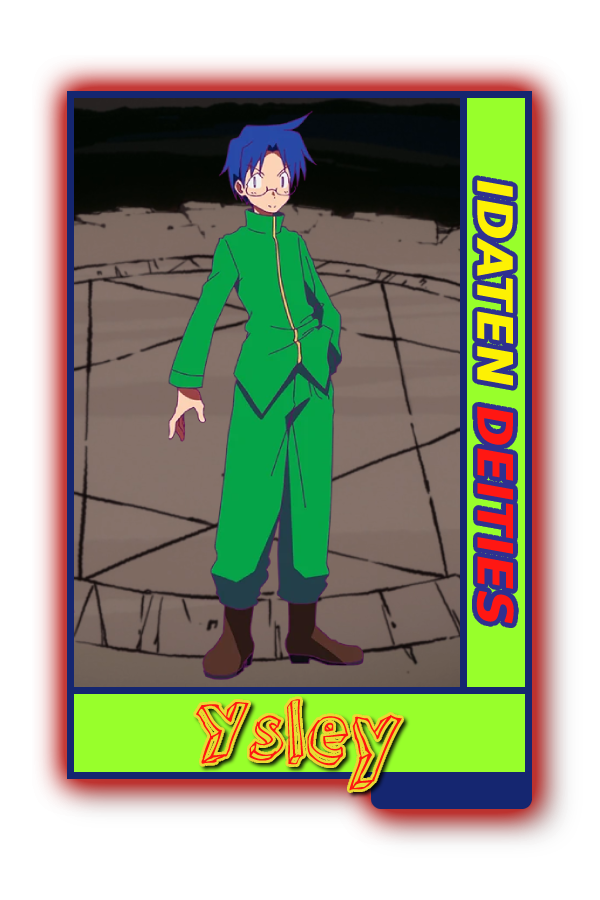
<style>
.page{position:relative;width:600px;height:900px;background:#ffffff}
.page>*{position:absolute;margin:0}
.t1{font:48.8px "MADETOMMY-Bold";color:#ff1713;font-weight:bold;font-style:italic}
.t2{font:48.8px "MADETOMMY-Bold";color:#fdf103;font-weight:bold;font-style:italic}
.t3{font:75px "3dumb";color:#ff1611}
</style>
<div class="page">
<p class="t1" style="left:476px;top:180px;width:38px;height:444px;rotate:90deg"><span class="t2">IDATEN </span>DEITIES</p>
<p class="t3" style="left:196px;top:699px;width:206px;height:92px">Ysley</p>
</div>
